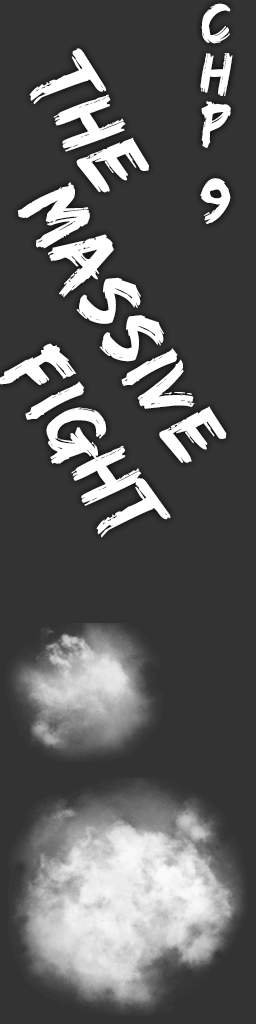
<style>
.page{position:relative;width:256px;height:1024px;background:#333333}
.page>*{position:absolute;margin:0}
.t1{font:60px/25.1px "EdoSZ";letter-spacing:0.03em;color:#ffffff}
.t2{font:91.3px "EdoSZ";letter-spacing:0.03em;color:#ffffff;scale:0.96 1}
.t3{font:86.6px "EdoSZ";letter-spacing:0.03em;color:#ffffff}
.t4{font:90.5px "EdoSZ";letter-spacing:0.03em;color:#ffffff;scale:0.95 1}
</style>
<div class="page">
<p class="t1" style="left:200px;top:3px;width:33px;height:221px;text-align:center">C<br><br>H<br><br>P<br><br><br>9</p>
<p class="t2" style="left:29px;top:48px;width:120px;height:145px;rotate:60deg">The</p>
<p class="t3" style="left:17px;top:182px;width:210px;height:281px;rotate:58deg">Massive</p>
<p class="t4" style="left:0px;top:343px;width:171px;height:195px;rotate:57deg">Fight</p>
</div>
